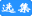
<style>
.page{position:relative;width:32px;height:16px;background:#2693ff}
.page>*{position:absolute;margin:0}
.t1{font:11.7px "STXinwei";color:#ffffff;scale:1.37 1}
</style>
<div class="page">
<p class="t1" style="left:1px;top:2px;width:30px;height:11px">选集</p>
</div>
